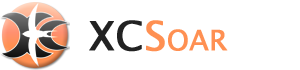
<style>
.page{position:relative;width:300px;height:70px;background:#ffffff}
.page>*{position:absolute;margin:0}
.t1{font:40px "LucidaSansUnicode";color:#ff9052;font-variant:small-caps;font-weight:bold}
.t2{font:40px "LucidaSansUnicode";color:#222222;font-variant:small-caps;font-weight:bold}
</style>
<div class="page">
<p class="t1" style="left:89px;top:20px;width:139px;height:32px"><span class="t2">XC</span>Soar</p>
</div>
